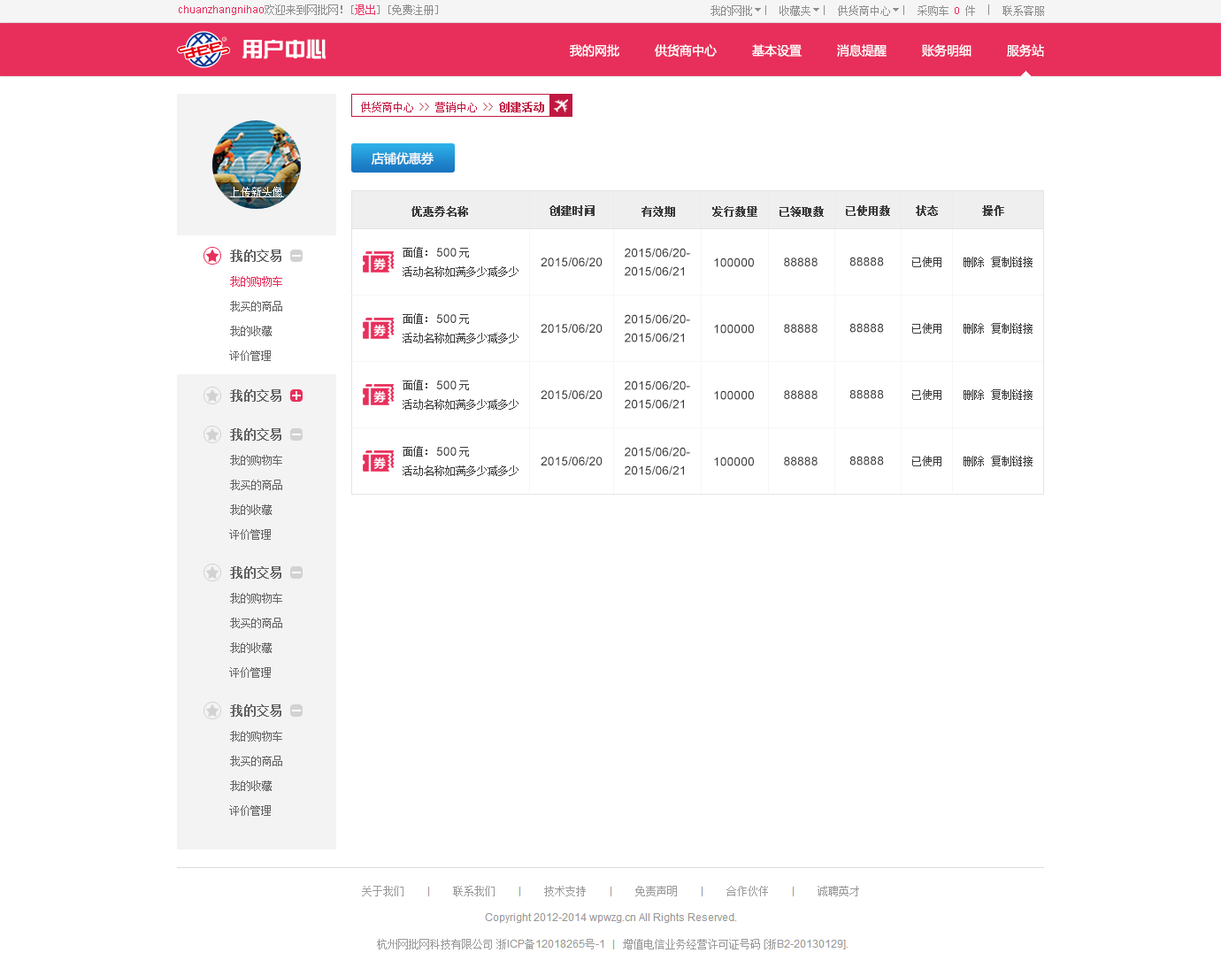
<style>
.page{position:relative;width:1221px;height:976px;background:#ffffff}
.page>*{position:absolute;margin:0}
.t1{font:10.6px "ArialMT";color:#e82f5b}
.t2{font:10.6px "SimSun";color:#8e8e8e}
.t3{font:10.6px "SimSun";color:#e82f5b}
.t4{font:21.2px "JZhongYi";color:#ffffff}
.t5{font:12.4px "MicrosoftYaHei";color:#ffffff}
.t6{font:10.6px "SimSun";color:#ffffff;text-decoration:underline}
.t7{font:10.6px "SimSun";color:#3c3c3c;font-weight:bold}
.t8{font:12.4px "SimSun";color:#646464;font-weight:bold}
.t9{font:10.6px "SimSun";color:#3c3c3c}
.t10{font:12.4px "ArialMT";color:#3c3c3c}
.t11{font:12.4px/18.6px "ArialMT";color:#3c3c3c}
.t12{font:10.6px "SimSun";color:#646464}
</style>
<div class="page">
<p class="t1" style="left:179px;top:4px;width:259px;height:11px">chuanzhangnihao<span class="t2">欢迎来到网批网！[</span><span class="t3">退出</span><span class="t2">] [免费注册]</span></p>
<p class="t2" style="left:711px;top:5px;width:333px;height:11px">我的网批     收藏夹     供货商中心     采购车 <span class="t3">0</span> 件     联系客服</p>
<p class="t4" style="left:243px;top:39px;width:83px;height:20px">用户中心</p>
<p class="t5" style="left:570px;top:44px;width:50px;height:13px">我的网批</p>
<p class="t5" style="left:655px;top:44px;width:62px;height:13px">供货商中心</p>
<p class="t5" style="left:752px;top:44px;width:50px;height:13px">基本设置</p>
<p class="t5" style="left:837px;top:44px;width:50px;height:13px">消息提醒</p>
<p class="t5" style="left:922px;top:44px;width:50px;height:13px">账务明细</p>
<p class="t5" style="left:1007px;top:44px;width:37px;height:13px">服务站</p>
<p class="t5" style="left:372px;top:152px;width:62px;height:13px">店铺优惠券</p>
<p class="t6" style="left:230px;top:187px;width:54px;height:10px">上传新头像</p>
<p class="t7" style="left:412px;top:206px;width:56px;height:11px">优惠券名称</p>
<p class="t7" style="left:550px;top:205px;width:45px;height:11px">创建时间</p>
<p class="t7" style="left:642px;top:206px;width:33px;height:11px">有效期</p>
<p class="t7" style="left:713px;top:206px;width:45px;height:11px">发行数量</p>
<p class="t7" style="left:780px;top:206px;width:44px;height:11px">已领取数</p>
<p class="t7" style="left:846px;top:205px;width:44px;height:11px">已使用数</p>
<p class="t7" style="left:916px;top:205px;width:22px;height:11px">状态</p>
<p class="t7" style="left:982px;top:205px;width:23px;height:11px">操作</p>
<p class="t8" style="left:230px;top:250px;width:51px;height:12px">我的交易</p>
<p class="t9" style="left:403px;top:247px;width:25px;height:11px">面值：</p>
<p class="t10" style="left:436px;top:248px;width:21px;height:9px">500</p>
<p class="t9" style="left:459px;top:248px;width:10px;height:10px">元</p>
<p class="t10" style="left:541px;top:258px;width:62px;height:8px">2015/06/20</p>
<p class="t11" style="left:625px;top:248px;width:65px;height:28px">2015/06/20-<br>2015/06/21</p>
<p class="t10" style="left:714px;top:258px;width:40px;height:9px">100000</p>
<p class="t10" style="left:784px;top:258px;width:34px;height:8px">88888</p>
<p class="t10" style="left:850px;top:257px;width:34px;height:9px">88888</p>
<p class="t9" style="left:913px;top:257px;width:29px;height:10px">已使用</p>
<p class="t9" style="left:964px;top:257px;width:20px;height:10px">删除</p>
<p class="t9" style="left:991px;top:257px;width:42px;height:10px">复制链接</p>
<p class="t9" style="left:403px;top:266px;width:116px;height:11px">活动名称如满多少减多少</p>
<p class="t3" style="left:230px;top:276px;width:52px;height:11px">我的购物车</p>
<p class="t12" style="left:230px;top:301px;width:52px;height:11px">我买的商品</p>
<p class="t9" style="left:403px;top:313px;width:25px;height:11px">面值：</p>
<p class="t10" style="left:436px;top:314px;width:21px;height:9px">500</p>
<p class="t9" style="left:459px;top:314px;width:10px;height:10px">元</p>
<p class="t11" style="left:625px;top:314px;width:65px;height:29px">2015/06/20-<br>2015/06/21</p>
<p class="t12" style="left:230px;top:326px;width:42px;height:10px">我的收藏</p>
<p class="t10" style="left:541px;top:324px;width:62px;height:9px">2015/06/20</p>
<p class="t10" style="left:714px;top:324px;width:40px;height:10px">100000</p>
<p class="t10" style="left:784px;top:324px;width:34px;height:9px">88888</p>
<p class="t10" style="left:850px;top:323px;width:34px;height:10px">88888</p>
<p class="t9" style="left:913px;top:323px;width:29px;height:11px">已使用</p>
<p class="t9" style="left:964px;top:323px;width:20px;height:11px">删除</p>
<p class="t9" style="left:991px;top:323px;width:42px;height:11px">复制链接</p>
<p class="t9" style="left:403px;top:333px;width:116px;height:10px">活动名称如满多少减多少</p>
<p class="t12" style="left:229px;top:350px;width:42px;height:11px">评价管理</p>
<p class="t8" style="left:230px;top:389px;width:51px;height:13px">我的交易</p>
<p class="t9" style="left:403px;top:380px;width:25px;height:10px">面值：</p>
<p class="t10" style="left:436px;top:381px;width:21px;height:8px">500</p>
<p class="t9" style="left:459px;top:381px;width:10px;height:9px">元</p>
<p class="t11" style="left:625px;top:381px;width:65px;height:28px">2015/06/20-<br>2015/06/21</p>
<p class="t10" style="left:850px;top:389px;width:34px;height:10px">88888</p>
<p class="t9" style="left:913px;top:389px;width:29px;height:11px">已使用</p>
<p class="t9" style="left:964px;top:389px;width:20px;height:11px">删除</p>
<p class="t9" style="left:991px;top:389px;width:42px;height:11px">复制链接</p>
<p class="t9" style="left:403px;top:399px;width:116px;height:11px">活动名称如满多少减多少</p>
<p class="t10" style="left:541px;top:390px;width:62px;height:9px">2015/06/20</p>
<p class="t10" style="left:714px;top:390px;width:40px;height:10px">100000</p>
<p class="t10" style="left:784px;top:390px;width:34px;height:9px">88888</p>
<p class="t8" style="left:230px;top:428px;width:51px;height:13px">我的交易</p>
<p class="t9" style="left:403px;top:446px;width:25px;height:11px">面值：</p>
<p class="t10" style="left:436px;top:447px;width:21px;height:9px">500</p>
<p class="t9" style="left:459px;top:447px;width:10px;height:10px">元</p>
<p class="t11" style="left:625px;top:447px;width:65px;height:28px">2015/06/20-<br>2015/06/21</p>
<p class="t12" style="left:230px;top:455px;width:52px;height:11px">我的购物车</p>
<p class="t10" style="left:541px;top:457px;width:62px;height:9px">2015/06/20</p>
<p class="t10" style="left:714px;top:457px;width:40px;height:9px">100000</p>
<p class="t10" style="left:784px;top:457px;width:34px;height:9px">88888</p>
<p class="t10" style="left:850px;top:456px;width:34px;height:10px">88888</p>
<p class="t9" style="left:913px;top:456px;width:29px;height:10px">已使用</p>
<p class="t9" style="left:964px;top:456px;width:20px;height:10px">删除</p>
<p class="t9" style="left:991px;top:456px;width:42px;height:10px">复制链接</p>
<p class="t9" style="left:403px;top:466px;width:116px;height:10px">活动名称如满多少减多少</p>
<p class="t12" style="left:230px;top:480px;width:52px;height:10px">我买的商品</p>
<p class="t12" style="left:230px;top:505px;width:42px;height:10px">我的收藏</p>
<p class="t12" style="left:229px;top:529px;width:42px;height:11px">评价管理</p>
<p class="t8" style="left:230px;top:566px;width:51px;height:13px">我的交易</p>
<p class="t12" style="left:230px;top:593px;width:52px;height:11px">我的购物车</p>
<p class="t12" style="left:230px;top:618px;width:52px;height:10px">我买的商品</p>
<p class="t12" style="left:230px;top:643px;width:42px;height:10px">我的收藏</p>
<p class="t12" style="left:229px;top:667px;width:42px;height:11px">评价管理</p>
<p class="t8" style="left:230px;top:705px;width:51px;height:12px">我的交易</p>
<p class="t12" style="left:230px;top:731px;width:52px;height:11px">我的购物车</p>
<p class="t12" style="left:230px;top:756px;width:52px;height:10px">我买的商品</p>
<p class="t12" style="left:230px;top:781px;width:42px;height:10px">我的收藏</p>
<p class="t12" style="left:229px;top:805px;width:42px;height:11px">评价管理</p>
</div>
